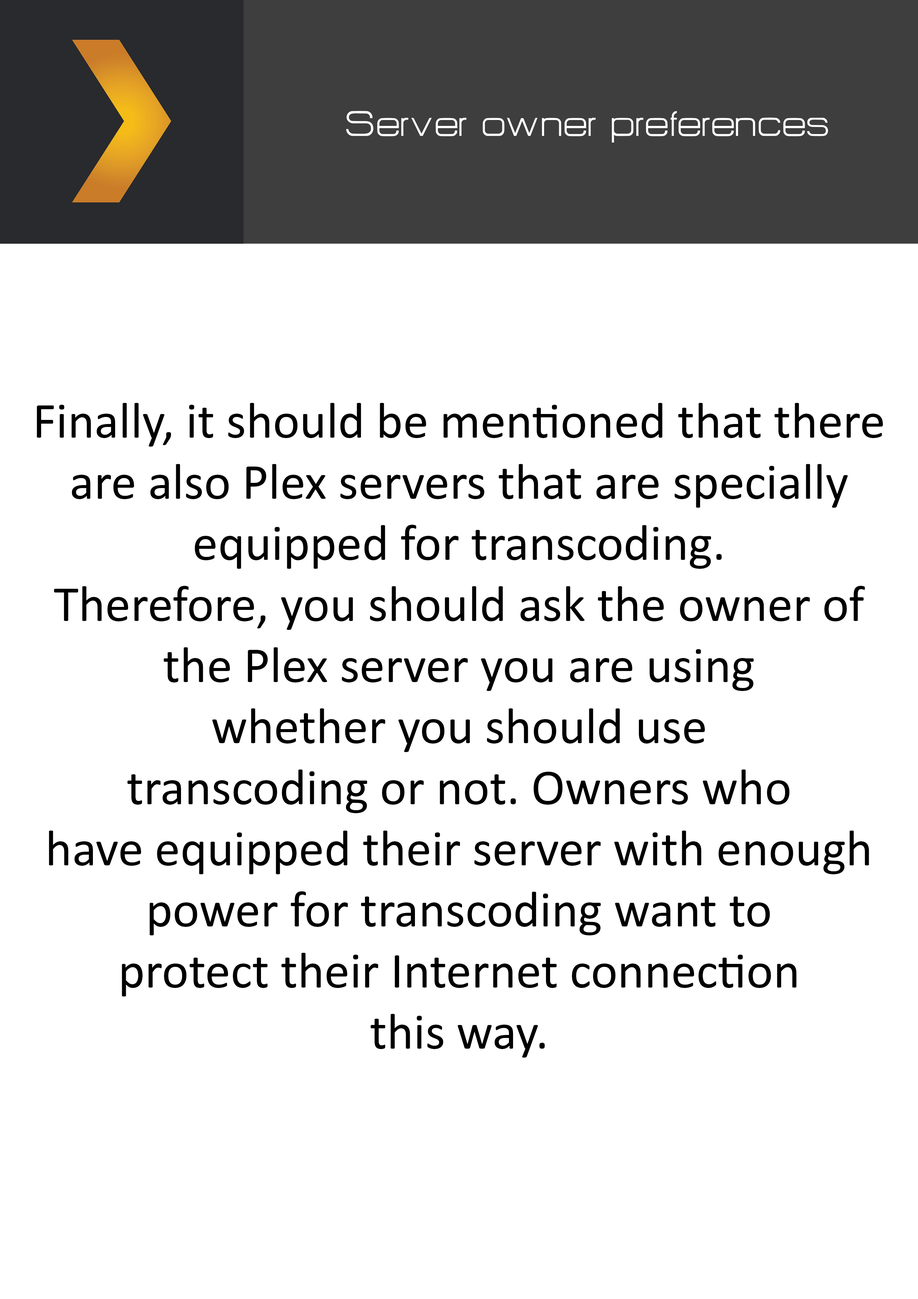
<style>
.page{position:relative;width:918px;height:1299px;background:#ffffff}
.page>*{position:absolute;margin:0}
.t1{font:43.2px "HURTMOLDPersonalUse-Regular";color:#ffffff}
.t2{font:50.9px "Calibri";color:#000000}
</style>
<div class="page">
<p class="t1" style="left:346px;top:111px;width:482px;height:32px">Server owner preferences</p>
<p class="t2" style="left:37px;top:403px;width:846px;height:654px;text-align:center">Finally, it should be mentioned that there<br>are also Plex servers that are specially<br>equipped for transcoding.<br>Therefore, you should ask the owner of<br>the Plex server you are using<br>whether you should use<br>transcoding or not. Owners who<br>have equipped their server with enough<br>power for transcoding want to<br>protect their Internet connection<br>this way.</p>
</div>
